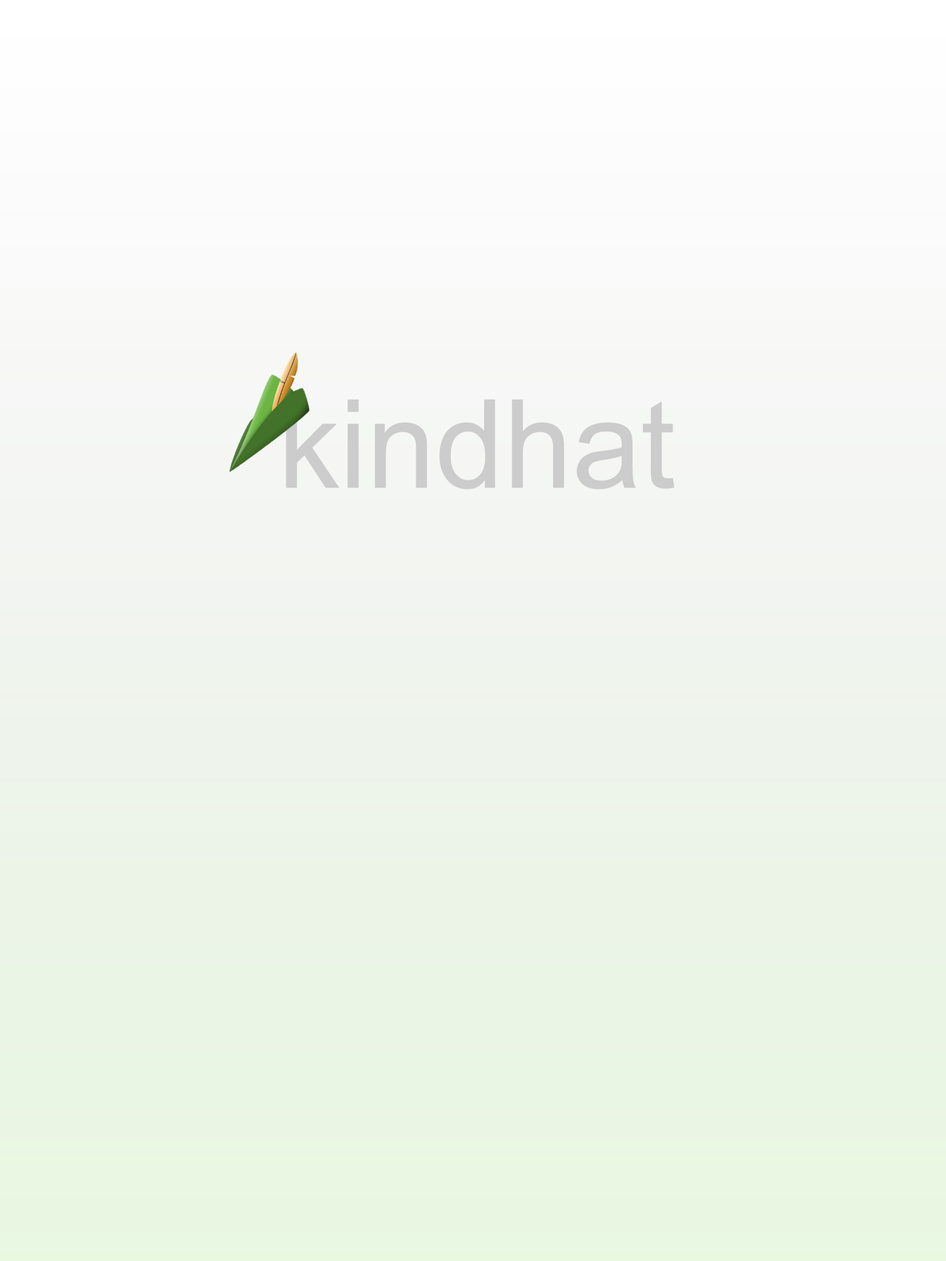
<style>
.page{position:relative;width:946px;height:1261px}
.page>*{position:absolute;margin:0}
.t1{font:123.1px "ArialMT";color:#cccccc}
</style>
<div class="page">
<p class="t1" style="left:286px;top:399px;width:388px;height:90px">kindhat</p>
</div>
